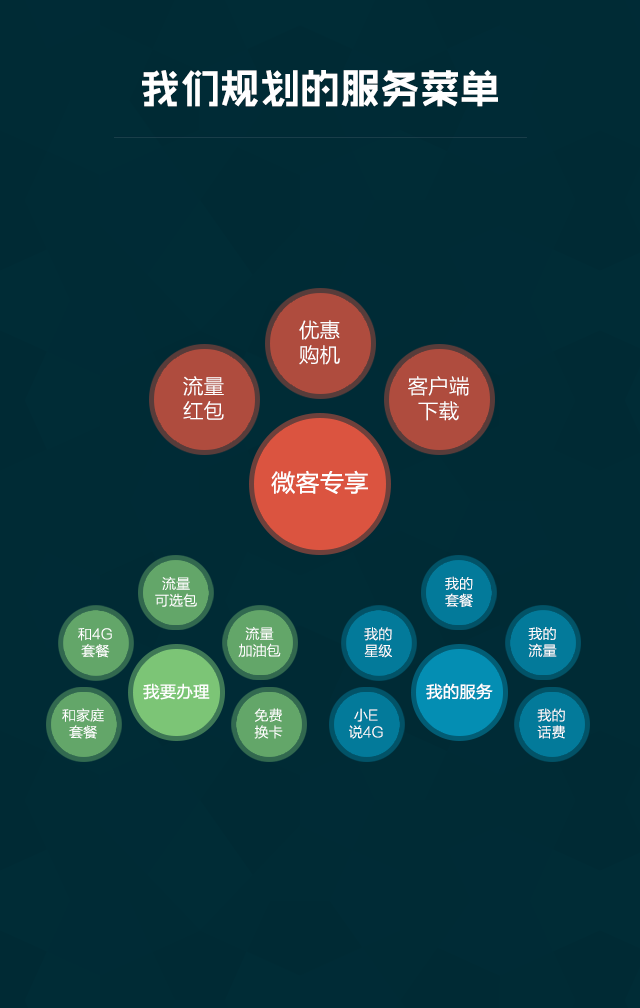
<style>
.page{position:relative;width:640px;height:1008px;background:#002b35}
.page>*{position:absolute;margin:0}
.t1{font:40px "RTWSShangGoG0v1-Bold";color:#ffffff}
.t2{font:20.7px "FZLTKHK--GBK1-0";color:#ffffff}
.t3{font:24.4px "FZLTHK--GBK1-0";color:#ffffff}
.t4{font:14px "FZLTKHK--GBK1-0";color:#ffffff}
.t5{font:16.6px "FZLTHK--GBK1-0";color:#ffffff}
</style>
<div class="page">
<p class="t1" style="left:142px;top:70px;width:356px;height:37px">我们规划的服务菜单</p>
<p class="t2" style="left:299px;top:320px;width:41px;height:45px;text-align:center">优惠<br>购机</p>
<p class="t2" style="left:183px;top:376px;width:41px;height:44px;text-align:center">流量<br>红包</p>
<p class="t2" style="left:408px;top:376px;width:61px;height:45px;text-align:center">客户端<br>下载</p>
<p class="t3" style="left:271px;top:470px;width:97px;height:24px">微客专享</p>
<p class="t4" style="left:155px;top:576px;width:42px;height:31px;text-align:center">流量<br>可选包</p>
<p class="t4" style="left:445px;top:576px;width:28px;height:31px;text-align:center">我的<br>套餐</p>
<p class="t4" style="left:78px;top:628px;width:34px;height:30px;text-align:center">和4G<br>套餐</p>
<p class="t4" style="left:238px;top:627px;width:43px;height:30px;text-align:center">流量<br>加油包</p>
<p class="t4" style="left:364px;top:627px;width:28px;height:31px;text-align:center">我的<br>星级</p>
<p class="t4" style="left:528px;top:627px;width:29px;height:30px;text-align:center">我的<br>流量</p>
<p class="t5" style="left:143px;top:683px;width:67px;height:17px">我要办理</p>
<p class="t5" style="left:426px;top:683px;width:67px;height:17px">我的服务</p>
<p class="t4" style="left:62px;top:708px;width:42px;height:31px;text-align:center">和家庭<br>套餐</p>
<p class="t4" style="left:254px;top:708px;width:29px;height:31px;text-align:center">免费<br>换卡</p>
<p class="t4" style="left:349px;top:708px;width:34px;height:31px;text-align:center">小E<br>说4G</p>
<p class="t4" style="left:537px;top:708px;width:28px;height:31px;text-align:center">我的<br>话费</p>
</div>
